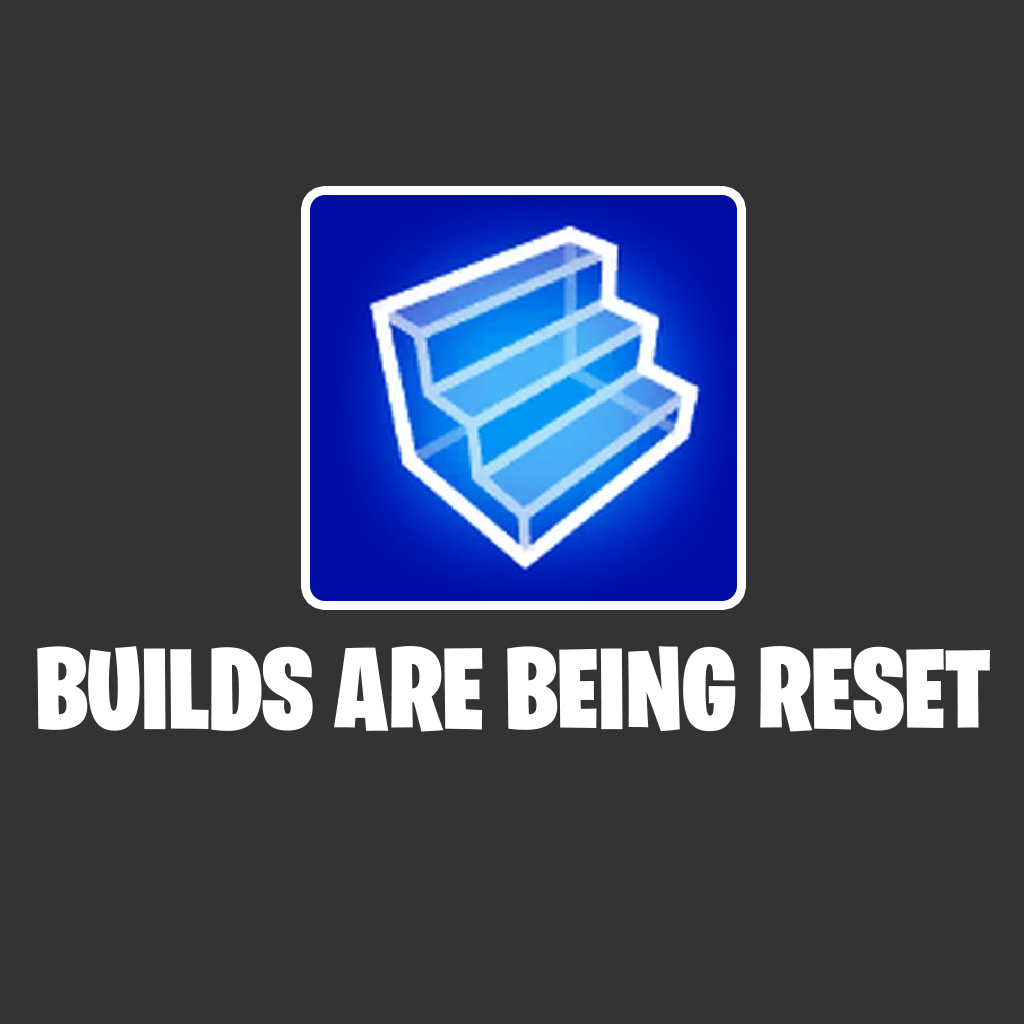
<style>
.page{position:relative;width:1024px;height:1024px;background:#333333}
.page>*{position:absolute;margin:0}
.t1{font:115.8px "BurbankBigCondensed-Black";color:#ffffff}
</style>
<div class="page">
<p class="t1" style="left:37px;top:646px;width:954px;height:86px">BUILDS ARE BEING RESET</p>
</div>
